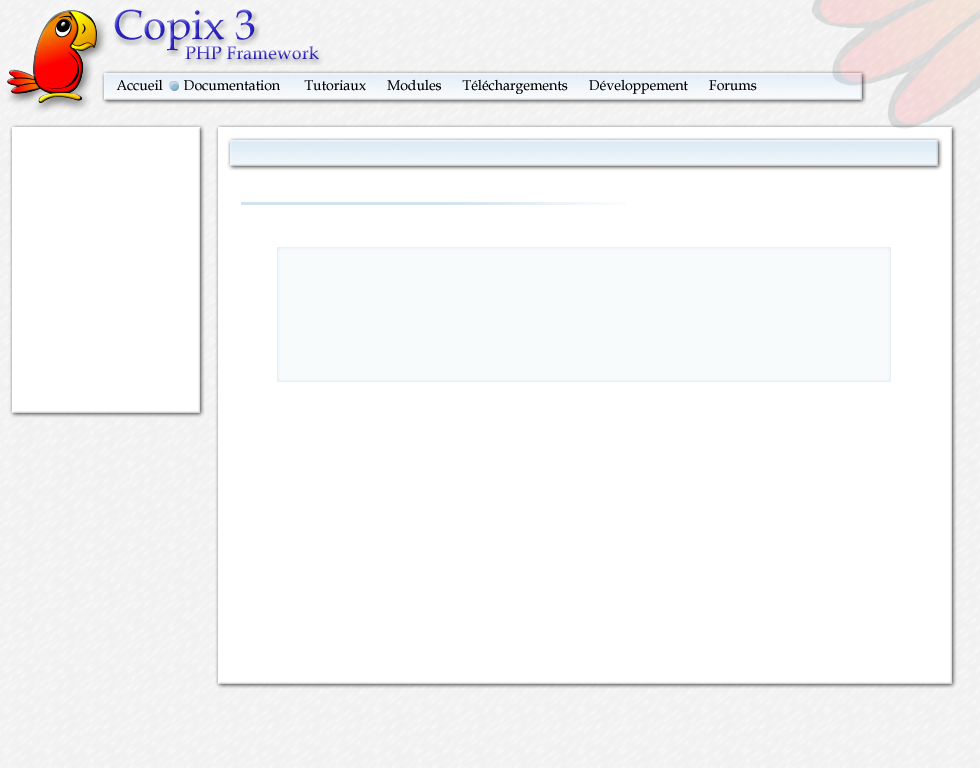
<style>
.page{position:relative;width:980px;height:768px;background:#ffffff}
.page>*{position:absolute;margin:0}
.t1{font:42px "BookAntiqua";color:#2c25c4}
.t2{font:18px "BookAntiqua"}
.t3{font:14px "BookAntiqua";color:#000000}
</style>
<div class="page">
<p class="t1" style="left:114px;top:9px;width:141px;height:42px">Copix 3</p>
<p class="t2" style="left:185px;top:46px;width:134px;height:14px">PHP Framework</p>
<p class="t3" style="left:116px;top:79px;width:641px;height:15px">Accueil      Documentation       Tutoriaux      Modules      Téléchargements      Développement      Forums</p>
</div>
